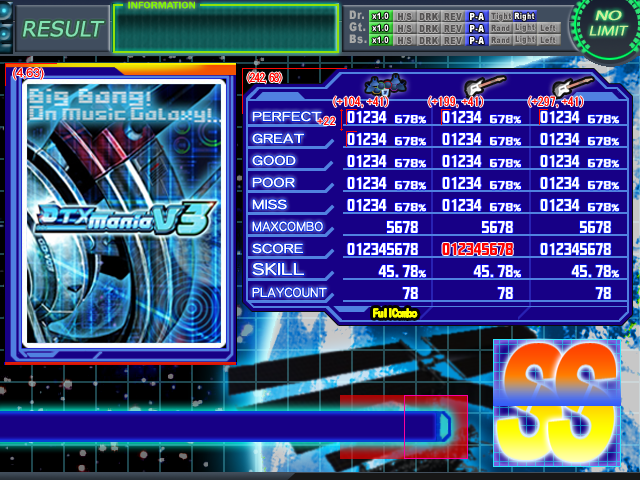
<style>
.page{position:relative;width:640px;height:480px;background:#170086}
.page>*{position:absolute;margin:0}
.t1{font:9.8px "FranklinGothic-Medium";color:#84f400;scale:1.14 1}
.t2{font:12px "Arial-Black";letter-spacing:0.05em;color:#a7a8a7;scale:0.83 1}
.t3{font:14px/15px "Myriad-Roman";color:#d0f09a;font-style:italic;scale:1.2 1}
.t4{font:14px/15px "Myriad-Roman";letter-spacing:-0.05em;color:#d0f09a;font-weight:bold;font-style:italic;scale:1.4 1}
.t5{font:21px "MSReferenceSansSerif";color:#82e2b2;font-style:italic}
.t6{font:12.6px/22px "DFHSMaruGothic-W4-WINP-RKSJ-H";color:#fcfcfc;font-weight:bold;scale:1.11 1}
.t7{font:12.6px/22px "DFHSMaruGothic-W4-WINP-RKSJ-H";color:#fcfcfc;font-weight:bold;scale:0.89 1}
.t8{font:16.2px/22px "DFHSMaruGothic-W4-WINP-RKSJ-H";color:#fcfcfc;font-weight:bold;scale:1.11 1}
.t9{font:18px/22px "DFSoGeiI-W6-WIN-RKSJ-H";color:#ffffff;font-weight:bold;scale:0.83 1}
.t10{font:12px/22px "DFSoGeiI-W6-WIN-RKSJ-H";color:#ffffff;font-weight:bold;scale:1.25 1}
.t11{font:10px/22px "DFSoGeiI-W6-WIN-RKSJ-H";color:#ffffff;font-weight:bold;scale:1.5 1}
.t12{font:18px/22px "DFSoGeiI-W6-WIN-RKSJ-H";color:#fcfcfc;font-weight:bold;scale:0.83 1}
.t13{font:12px/22px "DFSoGeiI-W6-WIN-RKSJ-H";color:#fcfcfc;font-weight:bold;scale:1.25 1}
.t14{font:10px/22px "DFSoGeiI-W6-WIN-RKSJ-H";color:#fcfcfc;font-weight:bold;scale:1.5 1}
.t15{font:18px "DFSoGeiI-W6-WIN-RKSJ-H";color:#fc0303;font-weight:bold;scale:0.83 1}
.t16{font:12px "DFMaruGothic-SU-WIN-RKSJ-H";letter-spacing:-0.1em;color:#fbfe00}
</style>
<div class="page">
<p class="t1" style="left:128px;top:1px;width:67px;height:8px">INFORMATION</p>
<p class="t2" style="left:349px;top:10px;width:18px;height:34px">Dr.<br>Gt.<br>Bs.</p>
<p class="t3" style="left:589px;top:10px;width:40px;height:26px;text-align:center"><span class="t4">NO<br></span>LIMIT</p>
<p class="t5" style="left:23px;top:20px;width:82px;height:17px">RESULT</p>
<p class="t6" style="left:252px;top:111px;width:75px;height:187px">PERFECT<br>GREAT<br>GOOD<br>POOR<br>MISS<br><span class="t7">MAXCOMBO<br></span>SCORE<br><span class="t8">SKILL<br></span><span class="t7">PLAYCOUNT</span></p>
<p class="t9" style="left:347px;top:111px;width:79px;height:188px">01234 <span class="t10">678</span><span class="t11">%<br></span>01234 <span class="t10">678</span><span class="t11">%<br></span>01234 <span class="t10">678</span><span class="t11">%<br></span>01234 <span class="t10">678</span><span class="t11">%<br></span>01234 <span class="t10">678</span><span class="t11">%<br></span>     5678<br>012345678<br>    45.78<span class="t11">%<br></span>       78</p>
<p class="t12" style="left:442px;top:111px;width:79px;height:188px">01234 <span class="t13">678</span><span class="t14">%<br></span>01234 <span class="t13">678</span><span class="t14">%<br></span>01234 <span class="t13">678</span><span class="t14">%<br></span>01234 <span class="t13">678</span><span class="t14">%<br></span>01234 <span class="t13">678</span><span class="t14">%<br></span>     5678<br>012345678<br>    45.78<span class="t14">%<br></span>       78</p>
<p class="t12" style="left:540px;top:111px;width:79px;height:188px">01234 <span class="t13">678</span><span class="t14">%<br></span>01234 <span class="t13">678</span><span class="t14">%<br></span>01234 <span class="t13">678</span><span class="t14">%<br></span>01234 <span class="t13">678</span><span class="t14">%<br></span>01234 <span class="t13">678</span><span class="t14">%<br></span>     5678<br>012345678<br>    45.78<span class="t14">%<br></span>       78</p>
<p class="t15" style="left:442px;top:243px;width:71px;height:12px">012345678</p>
<p class="t16" style="left:373px;top:308px;width:45px;height:10px">FullCombo</p>
</div>
